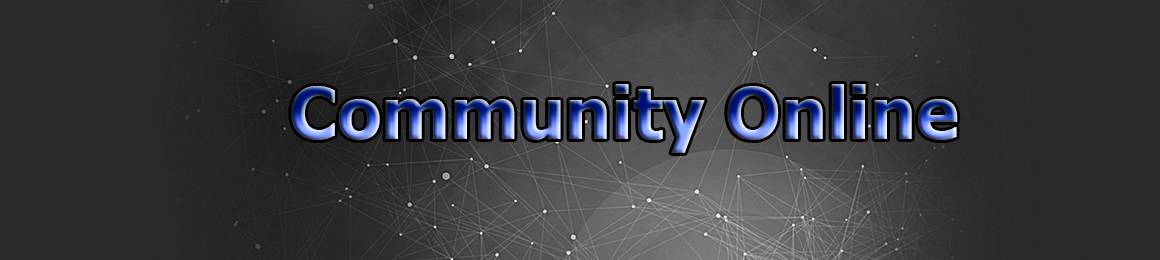
<style>
.page{position:relative;width:1160px;height:260px}
.page>*{position:absolute;margin:0}
.t1{font:72px "Tahoma-Bold"}
</style>
<div class="page">
<p class="t1" style="left:291px;top:84px;width:667px;height:69px">Community Online</p>
</div>
